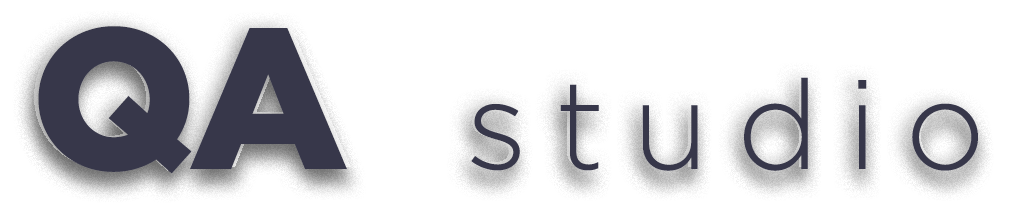
<style>
.page{position:relative;width:1016px;height:220px;background:#ffffff}
.page>*{position:absolute;margin:0}
.t1{font:125px "GothamPro-Light";letter-spacing:-0.04em;color:#37374a}
.t2{font:200px "GothamPro-Black";letter-spacing:-0.04em;color:#37374a}
</style>
<div class="page">
<p class="t1" style="left:38px;top:26px;width:940px;height:148px"><span class="t2">QA   </span>s t u d i o</p>
</div>
